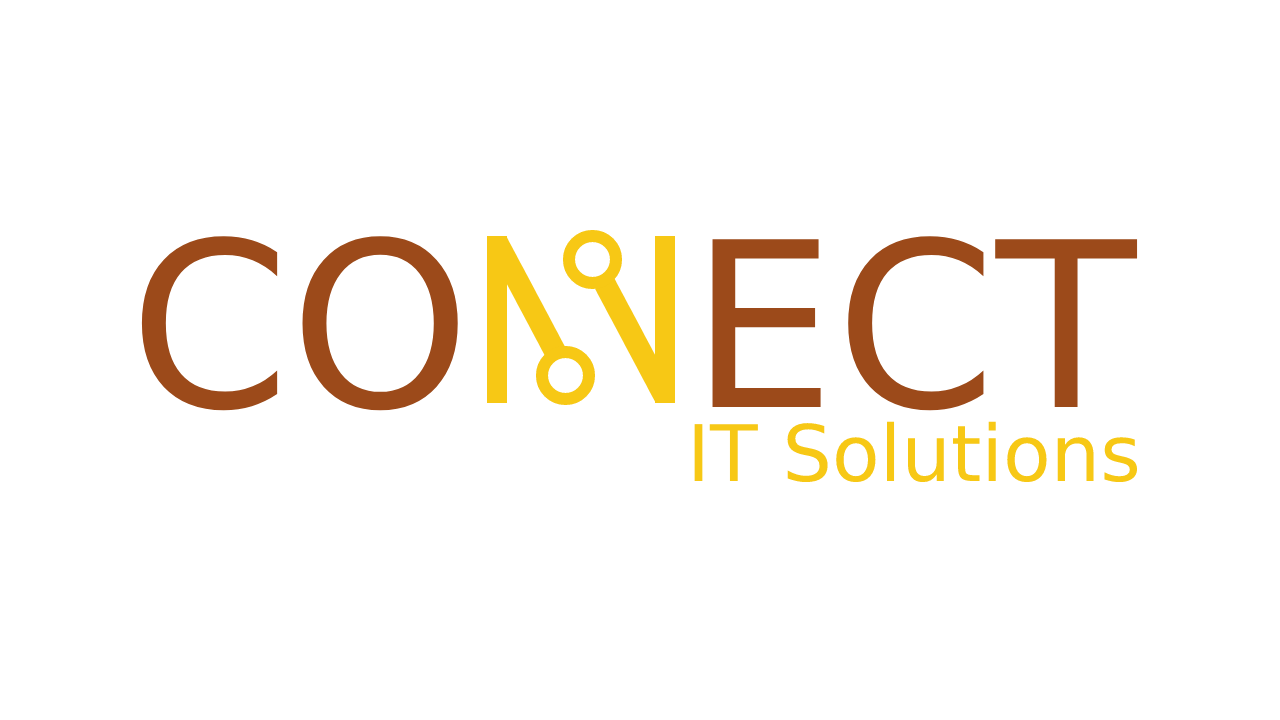
<style>
.page{position:relative;width:1280px;height:720px;background:#ffffff}
.page>*{position:absolute;margin:0}
.t1{font:230px "DejaVuSans";color:#9c4a1a}
.t2{font:78px "DejaVuSans";color:#f7c815}
</style>
<div class="page">
<p class="t1" style="left:141px;top:236px;width:997px;height:175px">CO   ECT</p>
<p class="t2" style="left:694px;top:421px;width:444px;height:62px">IT Solutions</p>
</div>
